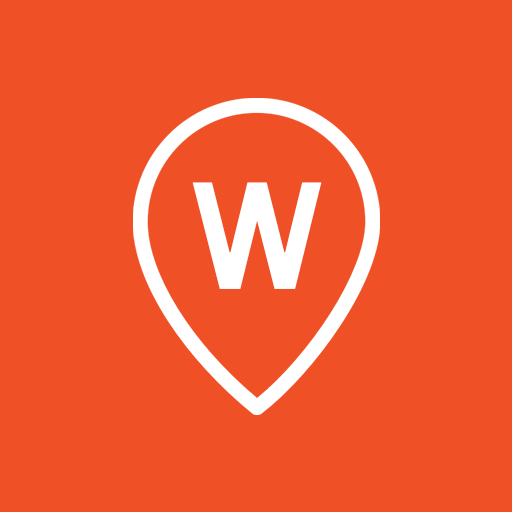
<style>
.page{position:relative;width:512px;height:512px;background:#f05026}
.page>*{position:absolute;margin:0}
.t1{font:125px "BMDoHyeon-OTF";letter-spacing:0.1em;color:#ffffff}
</style>
<div class="page">
<p class="t1" style="left:192px;top:182px;width:130px;height:107px">W</p>
</div>
